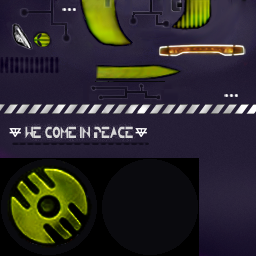
<style>
.page{position:relative;width:256px;height:256px}
.page>*{position:absolute;margin:0}
.t1{font:11.4px "TRON";color:#d6d6d6;scale:0.63 1}
</style>
<div class="page">
<p class="t1" style="left:25px;top:126px;width:108px;height:12px">we come in peace</p>
</div>
